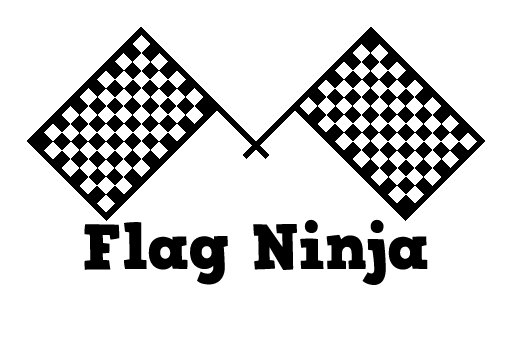
<style>
.page{position:relative;width:512px;height:350px;background:#ffffff}
.page>*{position:absolute;margin:0}
.t1{font:64px "HVDComicSerifPro";color:#000000}
</style>
<div class="page">
<p class="t1" style="left:84px;top:219px;width:344px;height:66px">Flag Ninja</p>
</div>
